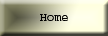
<style>
.page{position:relative;width:108px;height:36px}
.page>*{position:absolute;margin:0}
.t1{font:12px "Courier";color:#000000}
</style>
<div class="page">
<p class="t1" style="left:40px;top:14px;width:28px;height:7px">Home</p>
</div>
